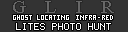
<style>
.page{position:relative;width:128px;height:32px;background:#333333}
.page>*{position:absolute;margin:0}
.t1{font:19.3px "TimesNewRomanPSMT";letter-spacing:1em;color:#676767}
.t2{font:8px "Terminal";color:#ffffff}
</style>
<div class="page">
<p class="t1" style="left:13px;top:1px;width:101px;height:12px">GLIR</p>
<p class="t2" style="left:16px;top:23px;width:95px;height:7px">LITES PHOTO HUNT</p>
</div>
